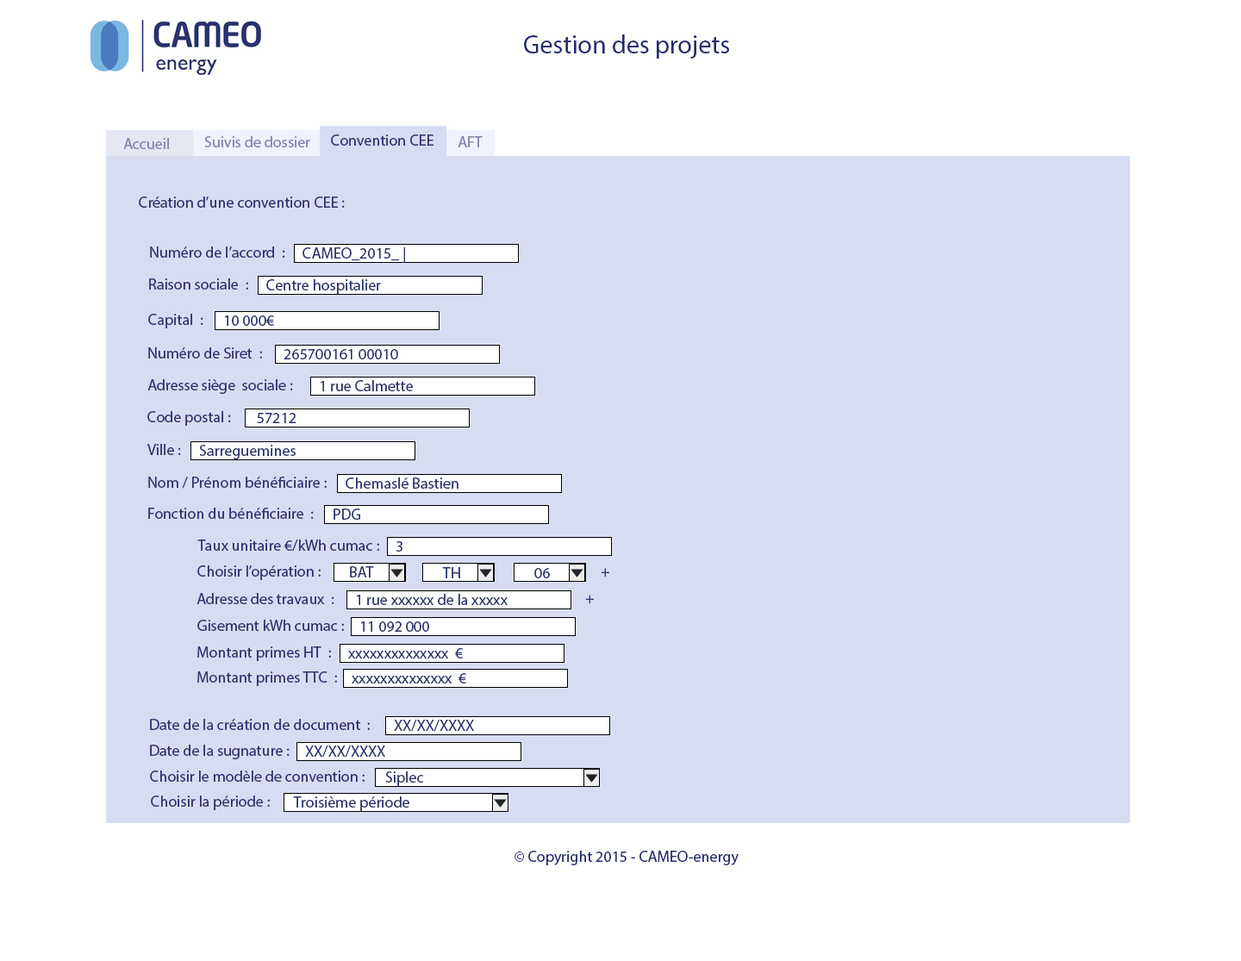
<style>
.page{position:relative;width:1241px;height:961px;background:#d8dcf3}
.page>*{position:absolute;margin:0}
.t1{font:25.9px "MyriadPro-Regular";color:#232c6e}
.t2{font:15.5px "MyriadPro-Regular";color:#8086ad}
.t3{font:15.5px "MyriadPro-Regular";color:#2b346f}
.t4{font:15.5px "MyriadPro-Regular";color:#232c6e}
</style>
<div class="page">
<p class="t1" style="left:524px;top:34px;width:205px;height:25px">Gestion des projets</p>
<p class="t2" style="left:123px;top:138px;width:46px;height:11px">Accueil</p>
<p class="t2" style="left:204px;top:136px;width:106px;height:11px">Suivis de dossier</p>
<p class="t3" style="left:331px;top:134px;width:103px;height:12px">Convention CEE</p>
<p class="t2" style="left:458px;top:136px;width:25px;height:11px">AFT</p>
<p class="t3" style="left:139px;top:196px;width:206px;height:12px">Création d’une convention CEE :</p>
<p class="t3" style="left:150px;top:246px;width:135px;height:12px">Numéro de l’accord  :</p>
<p class="t3" style="left:302px;top:246px;width:103px;height:17px">CAMEO_2015_ |</p>
<p class="t3" style="left:149px;top:278px;width:99px;height:12px">Raison sociale  :</p>
<p class="t3" style="left:266px;top:279px;width:115px;height:15px">Centre hospitalier</p>
<p class="t3" style="left:148px;top:314px;width:55px;height:14px">Capital  :</p>
<p class="t3" style="left:225px;top:315px;width:49px;height:11px">10 000€</p>
<p class="t3" style="left:148px;top:347px;width:114px;height:12px">Numéro de Siret  :</p>
<p class="t3" style="left:284px;top:349px;width:114px;height:10px">265700161 00010</p>
<p class="t3" style="left:147px;top:379px;width:146px;height:15px">Adresse siège  sociale :</p>
<p class="t3" style="left:321px;top:380px;width:92px;height:11px">1 rue Calmette</p>
<p class="t3" style="left:147px;top:411px;width:84px;height:15px">Code postal :</p>
<p class="t3" style="left:257px;top:413px;width:39px;height:10px">57212</p>
<p class="t3" style="left:147px;top:444px;width:34px;height:11px">Ville :</p>
<p class="t3" style="left:199px;top:445px;width:97px;height:14px">Sarreguemines</p>
<p class="t3" style="left:148px;top:477px;width:179px;height:12px">Nom / Prénom bénéficiaire :</p>
<p class="t3" style="left:346px;top:477px;width:112px;height:12px">Chemaslé Bastien</p>
<p class="t3" style="left:148px;top:508px;width:166px;height:11px">Fonction du bénéficiaire  :</p>
<p class="t3" style="left:334px;top:508px;width:26px;height:12px">PDG</p>
<p class="t3" style="left:197px;top:539px;width:182px;height:13px">Taux unitaire €/kWh cumac :</p>
<p class="t3" style="left:396px;top:541px;width:6px;height:11px">3</p>
<p class="t3" style="left:197px;top:565px;width:124px;height:15px">Choisir l’opération :</p>
<p class="t3" style="left:350px;top:566px;width:24px;height:11px">BAT</p>
<p class="t3" style="left:442px;top:567px;width:18px;height:11px">TH</p>
<p class="t3" style="left:534px;top:568px;width:16px;height:10px">06</p>
<p class="t3" style="left:601px;top:568px;width:8px;height:9px">+</p>
<p class="t3" style="left:196px;top:593px;width:138px;height:11px">Adresse des travaux  :</p>
<p class="t3" style="left:357px;top:594px;width:151px;height:11px">1 rue xxxxxx de la xxxxx</p>
<p class="t3" style="left:585px;top:595px;width:9px;height:9px">+</p>
<p class="t3" style="left:197px;top:620px;width:147px;height:11px">Gisement kWh cumac :</p>
<p class="t3" style="left:361px;top:621px;width:68px;height:11px">11 092 000</p>
<p class="t3" style="left:197px;top:646px;width:134px;height:15px">Montant primes HT  :</p>
<p class="t3" style="left:348px;top:648px;width:115px;height:10px">xxxxxxxxxxxxxx  €</p>
<p class="t3" style="left:197px;top:671px;width:140px;height:15px">Montant primes TTC  :</p>
<p class="t3" style="left:352px;top:673px;width:114px;height:10px">xxxxxxxxxxxxxx  €</p>
<p class="t3" style="left:150px;top:719px;width:220px;height:11px">Date de la création de document  :</p>
<p class="t3" style="left:394px;top:720px;width:80px;height:12px">XX/XX/XXXX</p>
<p class="t3" style="left:150px;top:745px;width:140px;height:14px">Date de la sugnature :</p>
<p class="t3" style="left:305px;top:745px;width:80px;height:13px">XX/XX/XXXX</p>
<p class="t3" style="left:150px;top:770px;width:215px;height:12px">Choisir le modèle de convention :</p>
<p class="t3" style="left:385px;top:771px;width:38px;height:15px">Siplec</p>
<p class="t3" style="left:151px;top:795px;width:119px;height:15px">Choisir la période :</p>
<p class="t3" style="left:293px;top:796px;width:116px;height:15px">Troisième période</p>
<p class="t4" style="left:514px;top:851px;width:225px;height:14px">© Copyright 2015 - CAMEO-energy</p>
</div>
